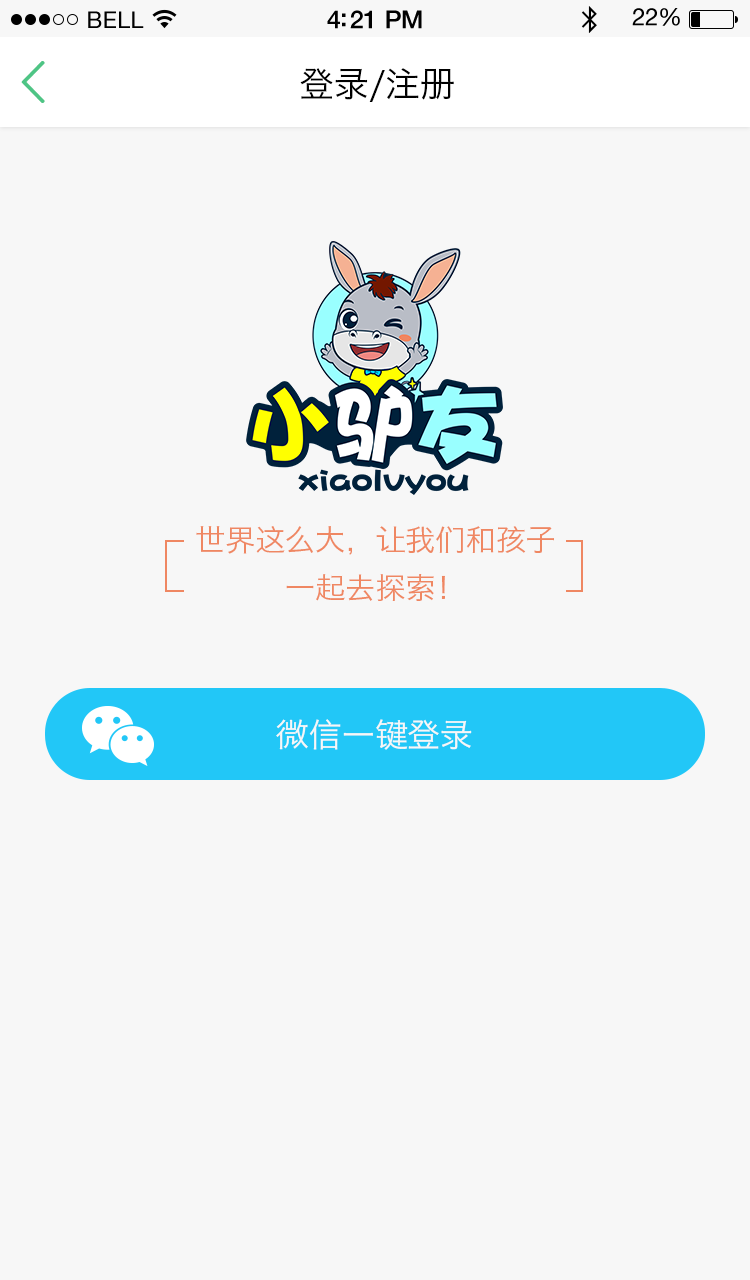
<style>
.page{position:relative;width:750px;height:1280px;background:#f7f7f7}
.page>*{position:absolute;margin:0}
.t1{font:23px "HelveticaNeue";letter-spacing:0.02em;color:#000000}
.t2{font:25px "HelveticaNeue-Medium";letter-spacing:-0.02em;color:#000000}
.t3{font:24px "HelveticaNeue";letter-spacing:-0.02em;color:#000000}
.t4{font:57.9px "YouYuan";color:#4ec585;font-weight:bold}
.t5{font:35px "HiraginoSansGB-W3";color:#000000}
.t6{font:30px/48px "HiraginoSansGB-W3";color:#ef8762}
.t7{font:32.9px "HiraginoSansGB-W3";color:#f7f7f7}
</style>
<div class="page">
<p class="t1" style="left:88px;top:11px;width:56px;height:17px">BELL</p>
<p class="t2" style="left:327px;top:10px;width:95px;height:19px">4:21 PM</p>
<p class="t3" style="left:632px;top:8px;width:48px;height:18px">22%</p>
<p class="t4" style="left:21px;top:61px;width:24px;height:42px">&lt;</p>
<p class="t5" style="left:300px;top:68px;width:154px;height:34px">登录/注册</p>
<p class="t6" style="left:196px;top:526px;width:358px;height:75px;text-align:center">世界这么大，让我们和孩子<br>一起去探索！</p>
<p class="t7" style="left:276px;top:719px;width:196px;height:31px">微信一键登录</p>
</div>
